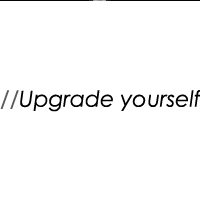
<style>
.page{position:relative;width:200px;height:200px;background:#ffffff}
.page>*{position:absolute;margin:0}
.t1{font:22px "CenturyGothic-Italic"}
</style>
<div class="page">
<p class="t1" style="left:0px;top:89px;width:202px;height:22px">//Upgrade yourself</p>
</div>
